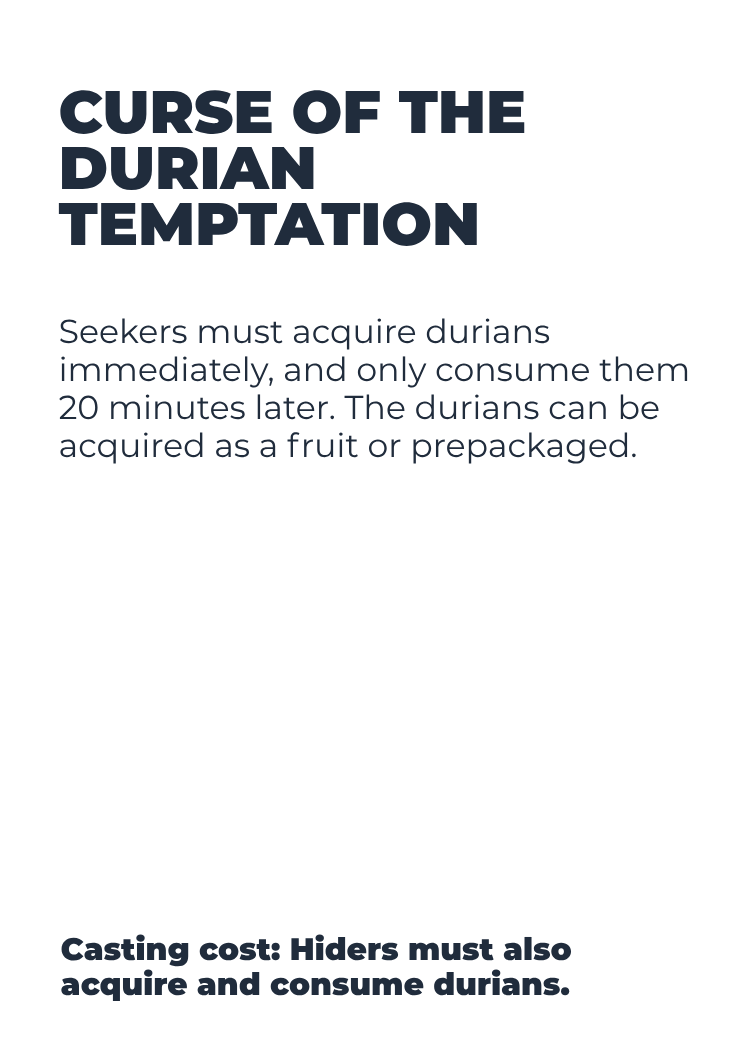
<style>
.page{position:relative;width:750px;height:1050px;background:#ffffff}
.page>*{position:absolute;margin:0}
.t1{font:59.8px/56.4px "Montserrat-Black";color:#202c3c}
.t2{font:33.1px/38px "Montserrat-Regular";color:#202c3c}
.t3{font:31.1px/35.6px "Montserrat-Black";color:#202c3c}
</style>
<div class="page">
<p class="t1" style="left:58px;top:90px;width:467px;height:156px">CURSE OF THE<br>DURIAN<br>TEMPTATION</p>
<p class="t2" style="left:59px;top:318px;width:629px;height:146px">Seekers must acquire durians<br>immediately, and only consume them<br>20 minutes later. The durians can be<br>acquired as a fruit or prepackaged.</p>
<p class="t3" style="left:61px;top:934px;width:511px;height:68px">Casting cost: Hiders must also<br>acquire and consume durians.</p>
</div>
